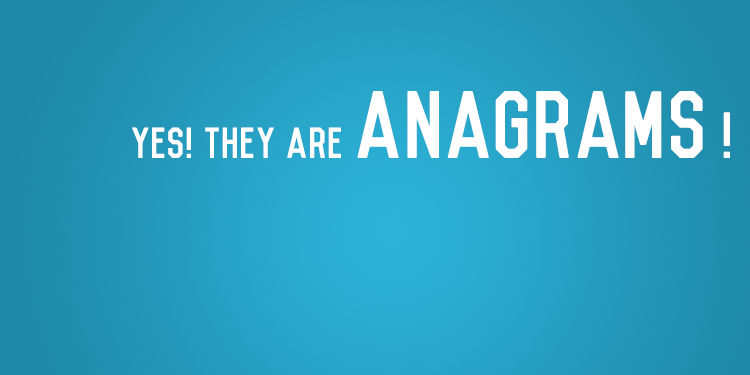
<style>
.page{position:relative;width:750px;height:375px}
.page>*{position:absolute;margin:0}
.t1{font:40px "Vincent-Regular";color:#ffffff}
.t2{font:88px "Vincent-Regular";color:#ffffff}
.t3{font:60px "Vincent-Regular";color:#ffffff}
</style>
<div class="page">
<p class="t1" style="left:132px;top:91px;width:598px;height:67px">yes! they are <span class="t2">aNAGRAMs </span><span class="t3">!</span></p>
</div>
